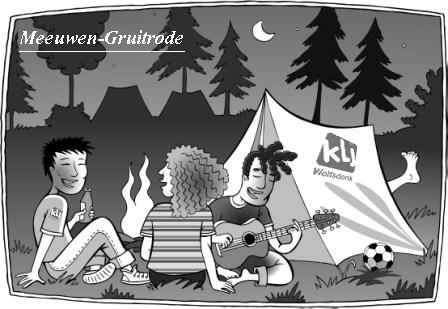
<style>
.page{position:relative;width:448px;height:309px}
.page>*{position:absolute;margin:0}
.t1{font:24px "Aparajita-BoldItalic";color:#f9fcf9;text-decoration:underline}
</style>
<div class="page">
<p class="t1" style="left:19px;top:30px;width:166px;height:22px">Meeuwen-Gruitrode</p>
</div>
